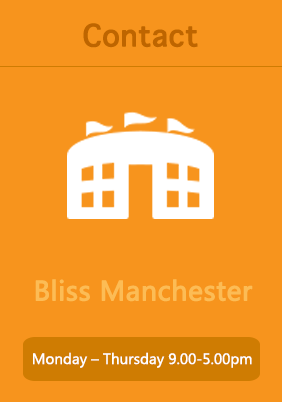
<style>
.page{position:relative;width:282px;height:402px;background:#f7941d}
.page>*{position:absolute;margin:0}
.t1{font:40px "AppleSymbols";color:#be6500;font-weight:bold}
.t2{font:26px "MicrosoftYaHei";color:#fcbc55;font-weight:bold}
.t3{font:14px "MicrosoftYaHei";color:#ffffff}
</style>
<div class="page">
<p class="t1" style="left:83px;top:23px;width:115px;height:25px">Contact</p>
<p class="t2" style="left:35px;top:279px;width:218px;height:23px">Bliss Manchester</p>
<p class="t3" style="left:33px;top:352px;width:219px;height:16px">Monday – Thursday 9.00-5.00pm</p>
</div>
